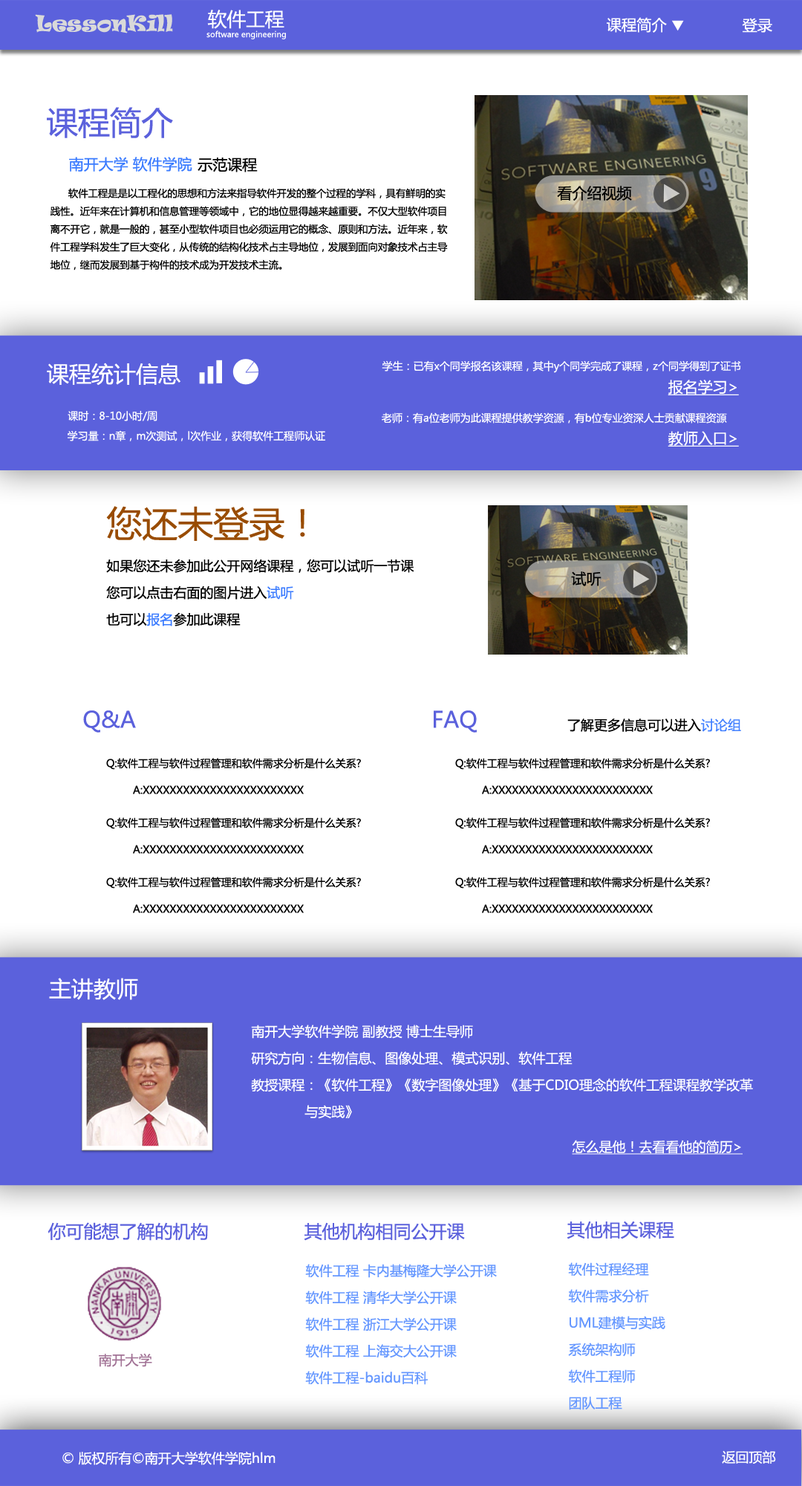
<style>
.page{position:relative;width:802px;height:1486px;background:#ffffff}
.page>*{position:absolute;margin:0}
.t1{font:20.3px "Ravie";color:#d9d9d9}
.t2{font:15px "MicrosoftYaHei";color:#ffffff}
.t3{font:14.9px "MicrosoftYaHei";color:#ffffff}
.t4{font:31.7px "MicrosoftYaHei";color:#5b61dc}
.t5{font:14.9px "MicrosoftYaHei";color:#3a7bff}
.t6{font:14.9px "MicrosoftYaHei";color:#000000}
.t7{font:9.9px/17.9px "MicrosoftYaHei";color:#010101}
.t8{font:22.3px "MicrosoftYaHei";color:#ffffff}
.t9{font:10.4px "MicrosoftYaHei";color:#ffffff}
.t10{font:14.9px "MicrosoftYaHei";color:#ffffff;text-decoration:underline}
.t11{font:13.4px/26.7px "MicrosoftYaHei";color:#000000}
.t12{font:35.7px/26.7px "MicrosoftYaHei";color:#994c01}
.t13{font:13.4px/26.7px "MicrosoftYaHei";color:#3a7bff}
.t14{font:22.3px "MicrosoftYaHei";color:#5b61dc}
.t15{font:13.4px "MicrosoftYaHei";color:#000000}
.t16{font:13.4px "MicrosoftYaHei";color:#4381ff}
.t17{font:10.4px/26.7px "MicrosoftYaHei";color:#010101}
.t18{font:13.4px/26.7px "MicrosoftYaHei";color:#ffffff}
.t19{font:13.4px "MicrosoftYaHei";color:#ffffff;text-decoration:underline}
.t20{font:17.8px "MicrosoftYaHei";color:#5b61dc}
.t21{font:13.4px/26.7px "MicrosoftYaHei";color:#6598ff}
.t22{font:13.4px "MicrosoftYaHei";color:#a17295}
.t23{font:13.4px "MicrosoftYaHei";color:#ffffff}
</style>
<div class="page">
<p class="t1" style="left:35px;top:14px;width:138px;height:19px">LessonKill</p>
<p class="t2" style="left:607px;top:17px;width:60px;height:16px">课程简介</p>
<p class="t3" style="left:742px;top:18px;width:31px;height:15px">登录</p>
<p class="t4" style="left:47px;top:107px;width:126px;height:32px">课程简介</p>
<p class="t5" style="left:69px;top:157px;width:123px;height:15px">南开大学 软件学院</p>
<p class="t6" style="left:198px;top:158px;width:60px;height:14px">示范课程</p>
<p class="t7" style="left:50px;top:188px;width:398px;height:82px">软件工程是是以工程化的思想和方法来指导软件开发的整个过程的学科，具有鲜明的实<br>践性。近年来在计算机和信息管理等领域中，它的地位显得越来越重要。不仅大型软件项目<br>离不开它，就是一般的，甚至小型软件项目也必须运用它的概念、原则和方法。近年来，软<br>件工程学科发生了巨大变化，从传统的结构化技术占主导地位，发展到面向对象技术占主导<br>地位，继而发展到基于构件的技术成为开发技术主流。</p>
<p class="t8" style="left:47px;top:363px;width:134px;height:23px">课程统计信息</p>
<p class="t9" style="left:382px;top:360px;width:360px;height:13px">学生：已有x个同学报名该课程，其中y个同学完成了课程，z个同学得到了证书</p>
<p class="t10" style="left:668px;top:380px;width:71px;height:15px">报名学习&gt;</p>
<p class="t9" style="left:68px;top:411px;width:90px;height:10px">课时：8-10小时/周</p>
<p class="t9" style="left:382px;top:412px;width:345px;height:12px">老师：有a位老师为此课程提供教学资源，有b位专业资深人士贡献课程资源</p>
<p class="t9" style="left:68px;top:430px;width:257px;height:11px">学习量：n章，m次测试，l次作业，获得软件工程师认证</p>
<p class="t10" style="left:668px;top:431px;width:71px;height:16px">教师入口&gt;</p>
<p class="t11" style="left:106px;top:506px;width:309px;height:120px"><span class="t12">您还未登录！<br><br></span>如果您还未参加此公开网络课程，您可以试听一节课<br>您可以点击右面的图片进入<span class="t13">试听<br></span>也可以<span class="t13">报名</span>参加此课程</p>
<p class="t6" style="left:571px;top:571px;width:31px;height:15px">试听</p>
<p class="t14" style="left:83px;top:710px;width:53px;height:23px">Q&amp;A</p>
<p class="t14" style="left:434px;top:710px;width:43px;height:23px">FAQ</p>
<p class="t15" style="left:568px;top:718px;width:174px;height:14px">了解更多信息可以进入<span class="t16">讨论组</span></p>
<p class="t17" style="left:106px;top:758px;width:255px;height:36px">Q:软件工程与软件过程管理和软件需求分析是什么关系?<br> A:XXXXXXXXXXXXXXXXXXXXXXXX</p>
<p class="t17" style="left:455px;top:758px;width:255px;height:36px">Q:软件工程与软件过程管理和软件需求分析是什么关系?<br> A:XXXXXXXXXXXXXXXXXXXXXXXX</p>
<p class="t17" style="left:106px;top:817px;width:255px;height:37px">Q:软件工程与软件过程管理和软件需求分析是什么关系?<br> A:XXXXXXXXXXXXXXXXXXXXXXXX</p>
<p class="t17" style="left:455px;top:817px;width:255px;height:37px">Q:软件工程与软件过程管理和软件需求分析是什么关系?<br> A:XXXXXXXXXXXXXXXXXXXXXXXX</p>
<p class="t17" style="left:106px;top:877px;width:255px;height:36px">Q:软件工程与软件过程管理和软件需求分析是什么关系?<br> A:XXXXXXXXXXXXXXXXXXXXXXXX</p>
<p class="t17" style="left:455px;top:877px;width:255px;height:36px">Q:软件工程与软件过程管理和软件需求分析是什么关系?<br> A:XXXXXXXXXXXXXXXXXXXXXXXX</p>
<p class="t8" style="left:49px;top:978px;width:89px;height:22px">主讲教师</p>
<p class="t18" style="left:251px;top:1025px;width:502px;height:94px">南开大学软件学院 副教授 博士生导师<br>研究方向：生物信息、图像处理、模式识别、软件工程<br>教授课程：《软件工程》《数字图像处理》《基于CDIO理念的软件工程课程教学改革<br>  与实践》</p>
<p class="t19" style="left:572px;top:1140px;width:171px;height:15px">怎么是他！去看看他的简历&gt;</p>
<p class="t20" style="left:48px;top:1222px;width:160px;height:19px">你可能想了解的机构</p>
<p class="t20" style="left:304px;top:1222px;width:161px;height:19px">其他机构相同公开课</p>
<p class="t20" style="left:567px;top:1221px;width:108px;height:18px">其他相关课程</p>
<p class="t21" style="left:305px;top:1264px;width:192px;height:121px">软件工程 卡内基梅隆大学公开课<br>软件工程 清华大学公开课<br>软件工程 浙江大学公开课<br>软件工程 上海交大公开课<br>软件工程-baidu百科</p>
<p class="t21" style="left:568px;top:1262px;width:98px;height:148px">软件过程经理<br>软件需求分析<br>UML建模与实践<br>系统架构师<br>软件工程师<br>团队工程</p>
<p class="t22" style="left:99px;top:1353px;width:53px;height:14px">南开大学</p>
<p class="t23" style="left:62px;top:1451px;width:214px;height:14px">© 版权所有©南开大学软件学院hlm</p>
<p class="t23" style="left:722px;top:1450px;width:54px;height:14px">返回顶部</p>
</div>
